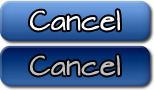
<style>
.page{position:relative;width:154px;height:90px}
.page>*{position:absolute;margin:0}
.t1{font:24px "ArchitectsDaughter";color:#fdfdfd}
.t2{font:24px "ArchitectsDaughter";color:#bfbfbf}
</style>
<div class="page">
<p class="t1" style="left:30px;top:10px;width:90px;height:21px">Cancel</p>
<p class="t2" style="left:30px;top:55px;width:90px;height:21px">Cancel</p>
</div>
